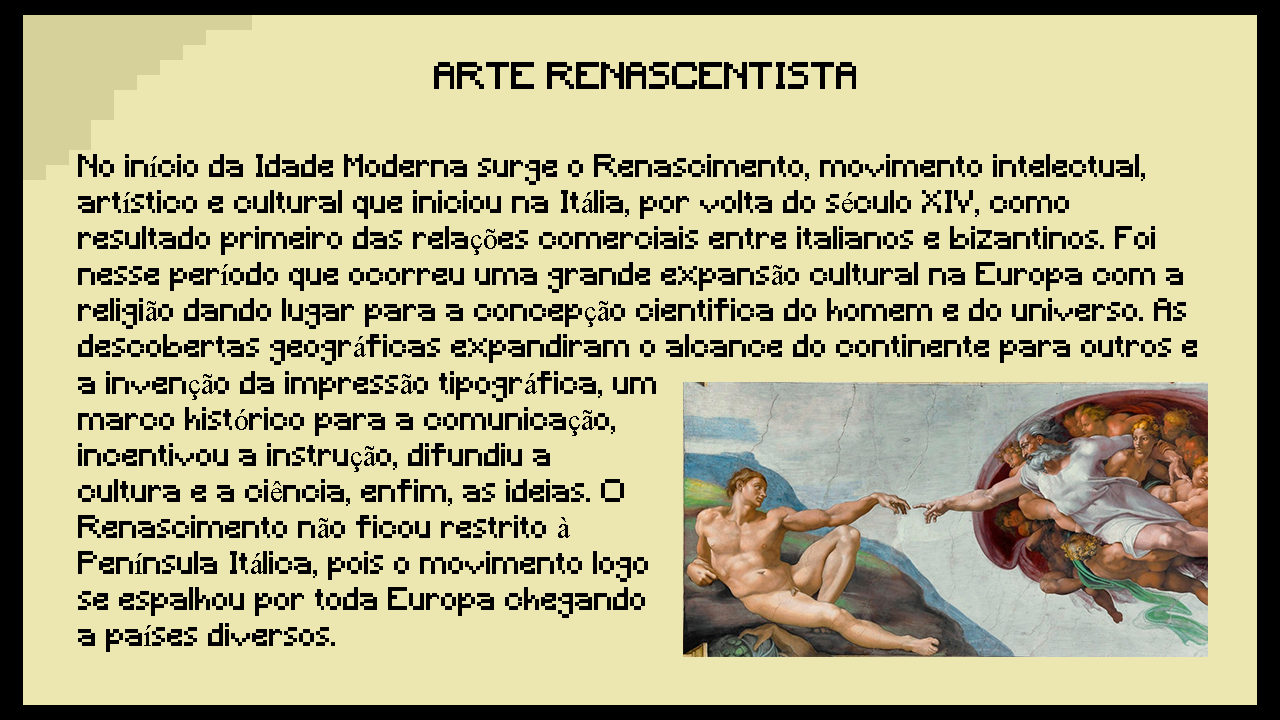
<style>
.page{position:relative;width:1280px;height:720px;background:#ece6b0}
.page>*{position:absolute;margin:0}
.t1{font:36px "Minecraft";color:#000000}
.t2{font:30px "Minecraft";color:#000000}
.t3{font:30px "TimesNewRomanPSMT";color:#000000}
</style>
<div class="page">
<p class="t1" style="left:434px;top:62px;width:422px;height:27px">ARTE RENASCENTISTA</p>
<p class="t2" style="left:78px;top:154px;width:1119px;height:211px">No in<span class="t3">í</span>cio da Idade Moderna surge o Renascimento, movimento intelectual, art<span class="t3">í</span>stico e cultural que iniciou na It<span class="t3">á</span>lia, por volta do s<span class="t3">é</span>culo XIV, como resultado primeiro das rela<span class="t3">çõ</span>es comerciais entre italianos e bizantinos. Foi nesse per<span class="t3">í</span>odo que ocorreu uma grande expans<span class="t3">ã</span>o cultural na Europa com a religi<span class="t3">ã</span>o dando lugar para a concep<span class="t3">çã</span>o cientifica do homem e do universo. As descobertas geogr<span class="t3">á</span>ficas expandiram o alcance do continente para outros e a inven<span class="t3">çã</span>o da impress<span class="t3">ã</span>o tipogr<span class="t3">á</span>fica, um marco hist<span class="t3">ó</span>rico para a comunica<span class="t3">çã</span>o, incentivou a instru<span class="t3">çã</span>o, difundiu a cultura e a ci<span class="t3">ê</span>ncia, enfim, as ideias. O Renascimento n<span class="t3">ã</span>o ficou restrito <span class="t3">à</span> Pen<span class="t3">í</span>nsula It<span class="t3">á</span>lica, pois o movimento logo se espalhou por toda Europa chegando a pa<span class="t3">í</span>ses diversos.</p>
<p class="t2" style="left:78px;top:371px;width:578px;height:281px">a inven<span class="t3">çã</span>o da impress<span class="t3">ã</span>o tipogr<span class="t3">á</span>fica, um marco hist<span class="t3">ó</span>rico para a comunica<span class="t3">çã</span>o, incentivou a instru<span class="t3">çã</span>o, difundiu a cultura e a ci<span class="t3">ê</span>ncia, enfim, as ideias. O Renascimento n<span class="t3">ã</span>o ficou restrito <span class="t3">à</span> Pen<span class="t3">í</span>nsula It<span class="t3">á</span>lica, pois o movimento logo se espalhou por toda Europa chegando a pa<span class="t3">í</span>ses diversos.</p>
</div>
